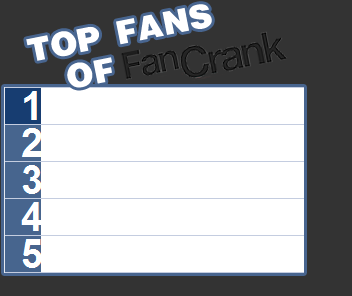
<style>
.page{position:relative;width:352px;height:296px;background:#ffffff}
.page>*{position:absolute;margin:0}
.t1{font:36px "Helvetica-Black-SemiBold";color:#ffffff}
</style>
<div class="page">
<p class="t1" style="left:26px;top:4px;width:186px;height:57px;rotate:-11deg">TOP FANS</p>
<p class="t1" style="left:67px;top:57px;width:45px;height:31px;rotate:-11deg">OF</p>
</div>
